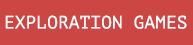
<style>
.page{position:relative;width:193px;height:45px;background:#cc4744}
.page>*{position:absolute;margin:0}
.t1{font:18px "PTMono-Regular";color:#ffffff}
</style>
<div class="page">
<p class="t1" style="left:5px;top:15px;width:182px;height:14px">EXPLORATION GAMES</p>
</div>
